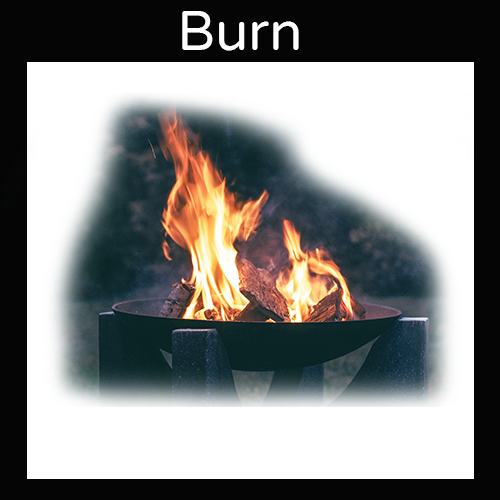
<style>
.page{position:relative;width:500px;height:500px;background:#ffffff}
.page>*{position:absolute;margin:0}
.t1{font:54.6px "VarelaRound-Regular";color:#ffffff}
</style>
<div class="page">
<p class="t1" style="left:182px;top:11px;width:117px;height:40px">Burn</p>
</div>
